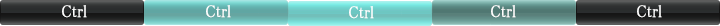
<style>
.page{position:relative;width:720px;height:26px}
.page>*{position:absolute;margin:0}
.t1{font:17.1px "MS-PMincho";color:#ffffff;font-weight:bold;scale:0.84 1}
</style>
<div class="page">
<p class="t1" style="left:62px;top:5px;width:25px;height:13px">Ctrl</p>
<p class="t1" style="left:206px;top:5px;width:25px;height:13px">Ctrl</p>
<p class="t1" style="left:349px;top:6px;width:25px;height:13px">Ctrl</p>
<p class="t1" style="left:491px;top:5px;width:25px;height:13px">Ctrl</p>
<p class="t1" style="left:637px;top:5px;width:25px;height:13px">Ctrl</p>
</div>
